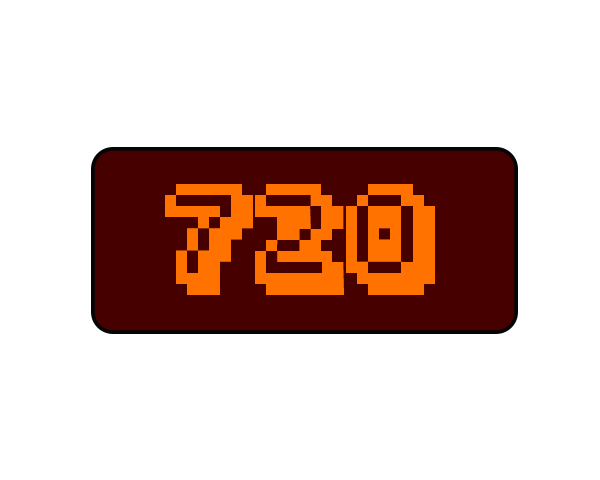
<style>
.page{position:relative;width:600px;height:480px;background:#ffffff}
.page>*{position:absolute;margin:0}
.t1{font:88.7px "Fipps-Regular";letter-spacing:0.02em;color:#ff7200}
</style>
<div class="page">
<p class="t1" style="left:165px;top:184px;width:270px;height:111px">720</p>
</div>
